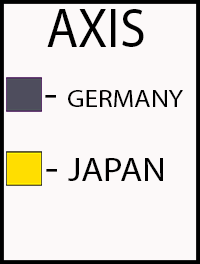
<style>
.page{position:relative;width:200px;height:264px;background:#fcf9f9}
.page>*{position:absolute;margin:0}
.t1{font:55px "MyriadPro-Regular";color:#000000;scale:0.95 1}
.t2{font:24.8px "MyriadPro-Regular";color:#000000;scale:1.1 1}
.t3{font:40px "MyriadPro-Regular";color:#000000;scale:1.1 1}
.t4{font:33px "MyriadPro-Regular";color:#000000;scale:1.1 1}
</style>
<div class="page">
<p class="t1" style="left:47px;top:9px;width:97px;height:38px">AXIS</p>
<p class="t2" style="left:45px;top:90px;width:138px;height:17px"><span class="t3">- </span>GERMANY</p>
<p class="t4" style="left:46px;top:158px;width:117px;height:23px"><span class="t3">- </span>JAPAN</p>
</div>
